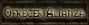
<style>
.page{position:relative;width:89px;height:25px}
.page>*{position:absolute;margin:0}
.t1{font:11.5px "Morpheus"}
</style>
<div class="page">
<p class="t1" style="left:4px;top:8px;width:82px;height:11px">Ofrecer Alianza</p>
</div>
